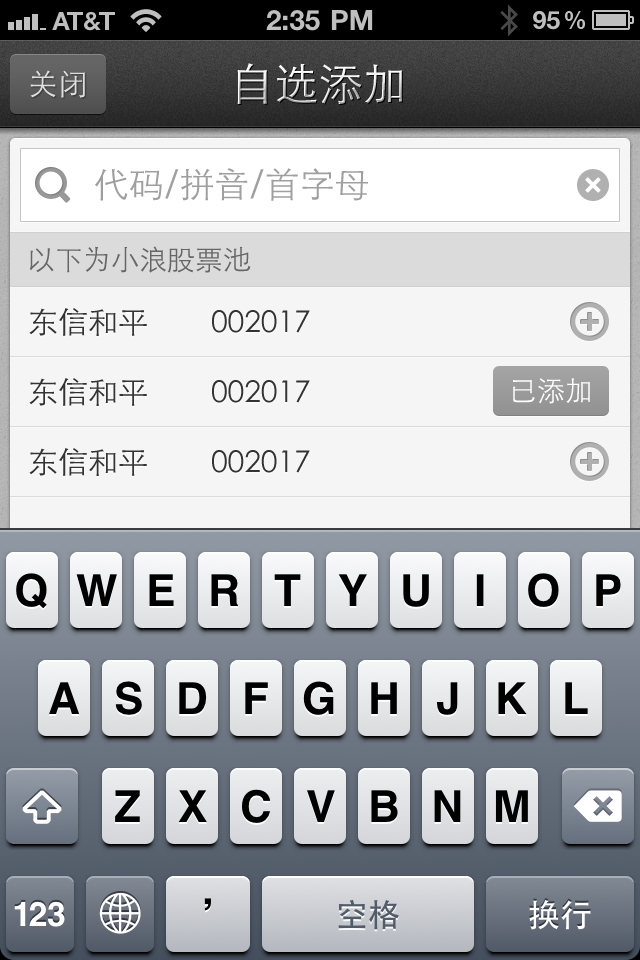
<style>
.page{position:relative;width:640px;height:960px;background:#f5f5f5}
.page>*{position:absolute;margin:0}
.t1{font:44px "STXihei";letter-spacing:0.005em}
.t2{font:30px "STXihei";letter-spacing:0.005em;color:#dfdfdf}
.t3{font:35px "STXihei";color:#9f9f9f}
.t4{font:28px "STXihei";color:#666666}
.t5{font:30px "STXihei";color:#333333}
.t6{font:28px "STXihei";color:#ffffff}
</style>
<div class="page">
<p class="t1" style="left:237px;top:63px;width:165px;height:41px">自选添加</p>
<p class="t2" style="left:30px;top:70px;width:55px;height:28px">关闭</p>
<p class="t3" style="left:95px;top:168px;width:273px;height:33px">代码/拼音/首字母</p>
<p class="t4" style="left:29px;top:246px;width:222px;height:27px">以下为小浪股票池</p>
<p class="t5" style="left:29px;top:308px;width:118px;height:28px">东信和平</p>
<p class="t5" style="left:212px;top:310px;width:98px;height:23px">002017</p>
<p class="t5" style="left:29px;top:378px;width:118px;height:28px">东信和平</p>
<p class="t5" style="left:212px;top:380px;width:98px;height:23px">002017</p>
<p class="t6" style="left:513px;top:378px;width:77px;height:26px">已添加</p>
<p class="t5" style="left:29px;top:448px;width:118px;height:28px">东信和平</p>
<p class="t5" style="left:212px;top:450px;width:98px;height:23px">002017</p>
</div>
